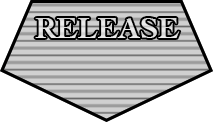
<style>
.page{position:relative;width:213px;height:122px;background:#ffffff}
.page>*{position:absolute;margin:0}
.t1{font:30px "Cochin-Bold";color:#e7e7e7}
</style>
<div class="page">
<p class="t1" style="left:35px;top:18px;width:145px;height:20px">RELEASE</p>
</div>
